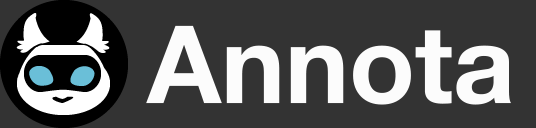
<style>
.page{position:relative;width:536px;height:128px;background:#333333}
.page>*{position:absolute;margin:0}
.t1{font:108px "HelveticaNeueBold";color:#fcfcfc}
</style>
<div class="page">
<p class="t1" style="left:146px;top:25px;width:365px;height:80px">Annota</p>
</div>
